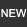
<style>
.page{position:relative;width:27px;height:27px;background:#333333}
.page>*{position:absolute;margin:0}
.t1{font:11px "ArialMT";color:#ffffff}
</style>
<div class="page">
<p class="t1" style="left:1px;top:9px;width:26px;height:8px">NEW</p>
</div>
